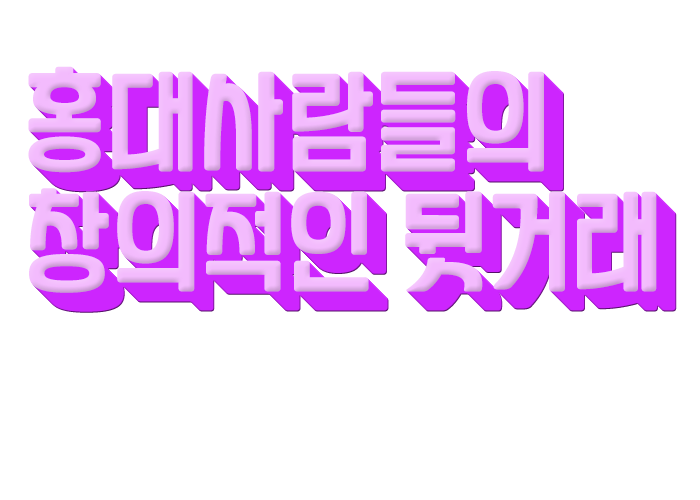
<style>
.page{position:relative;width:700px;height:500px;background:#ffffff}
.page>*{position:absolute;margin:0}
.t1{font:100px "YANGJIN";color:#f3bbfd}
.t2{font:100px "YANGJIN"}
</style>
<div class="page">
<p class="t1" style="left:28px;top:66px;width:629px;height:227px">홍대사람들의<br>창의적인 뒷거래</p>
<p class="t2" style="left:38px;top:76px;width:629px;height:227px">홍대사람들의<br>창의적인 뒷거래</p>
<p class="t2" style="left:39px;top:77px;width:629px;height:227px">홍대사람들의<br>창의적인 뒷거래</p>
<p class="t2" style="left:40px;top:78px;width:629px;height:227px">홍대사람들의<br>창의적인 뒷거래</p>
<p class="t2" style="left:41px;top:79px;width:629px;height:227px">홍대사람들의<br>창의적인 뒷거래</p>
<p class="t2" style="left:42px;top:80px;width:629px;height:227px">홍대사람들의<br>창의적인 뒷거래</p>
<p class="t2" style="left:43px;top:81px;width:629px;height:227px">홍대사람들의<br>창의적인 뒷거래</p>
<p class="t2" style="left:44px;top:82px;width:629px;height:227px">홍대사람들의<br>창의적인 뒷거래</p>
<p class="t2" style="left:45px;top:83px;width:629px;height:227px">홍대사람들의<br>창의적인 뒷거래</p>
<p class="t2" style="left:46px;top:84px;width:629px;height:227px">홍대사람들의<br>창의적인 뒷거래</p>
<p class="t2" style="left:47px;top:85px;width:629px;height:227px">홍대사람들의<br>창의적인 뒷거래</p>
<p class="t2" style="left:48px;top:86px;width:629px;height:227px">홍대사람들의<br>창의적인 뒷거래</p>
</div>
